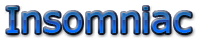
<style>
.page{position:relative;width:200px;height:40px;background:#ffffff}
.page>*{position:absolute;margin:0}
.t1{font:36px "Verdana"}
</style>
<div class="page">
<p class="t1" style="left:7px;top:7px;width:184px;height:26px">Insomniac</p>
</div>
